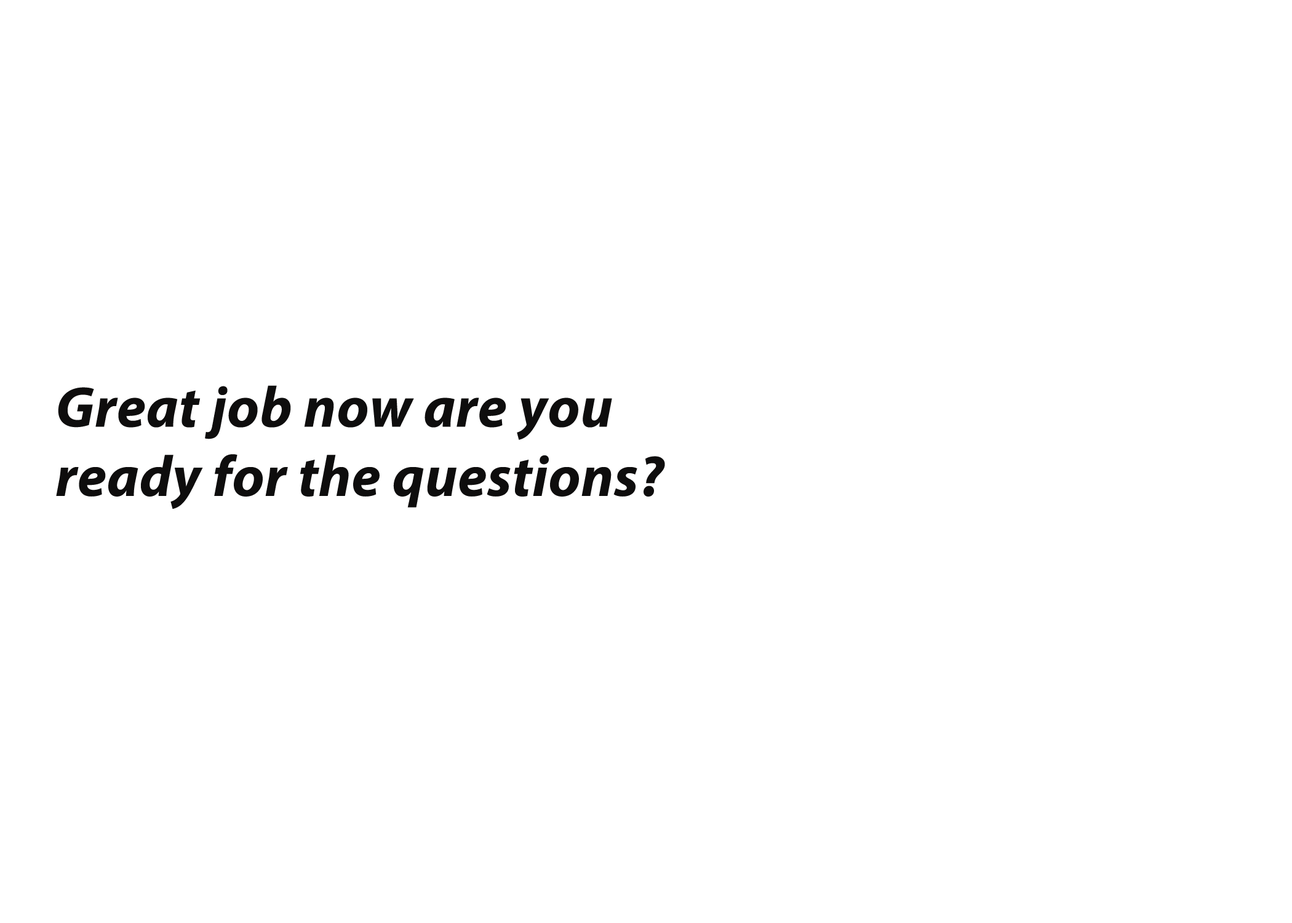
<style>
.page{position:relative;width:1292px;height:923px;background:#ffffff}
.page>*{position:absolute;margin:0}
.t1{font:57.6px "MyriadPro-BoldIt";letter-spacing:0.01em;color:#0e0d0d}
</style>
<div class="page">
<p class="t1" style="left:56px;top:385px;width:609px;height:124px">Great job now are you <br>ready for the questions?</p>
</div>
